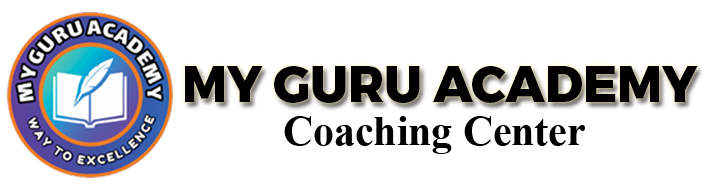
<style>
.page{position:relative;width:706px;height:190px;background:#ffffff}
.page>*{position:absolute;margin:0}
.t1{font:50px "Montserrat-ExtraBold";color:#000000}
.t2{font:41.7px "TimesNewRomanPS-BoldMT";color:#000000}
</style>
<div class="page">
<p class="t1" style="left:185px;top:66px;width:513px;height:37px">MY GURU ACADEMY</p>
<p class="t2" style="left:284px;top:116px;width:301px;height:38px">Coaching Center</p>
</div>
